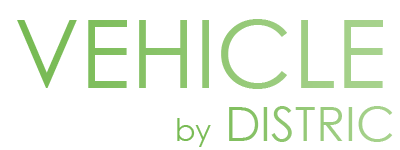
<style>
.page{position:relative;width:400px;height:150px;background:#ffffff}
.page>*{position:absolute;margin:0}
.t1{font:94px "CenturyGothic"}
.t2{font:48px "CenturyGothic";color:#94c876}
.t3{font:30px "CenturyGothic";color:#94c876}
</style>
<div class="page">
<p class="t1" style="left:17px;top:19px;width:366px;height:70px">VEHICLE</p>
<p class="t2" style="left:177px;top:106px;width:216px;height:41px"><span class="t3">by</span> DISTRIC</p>
</div>
